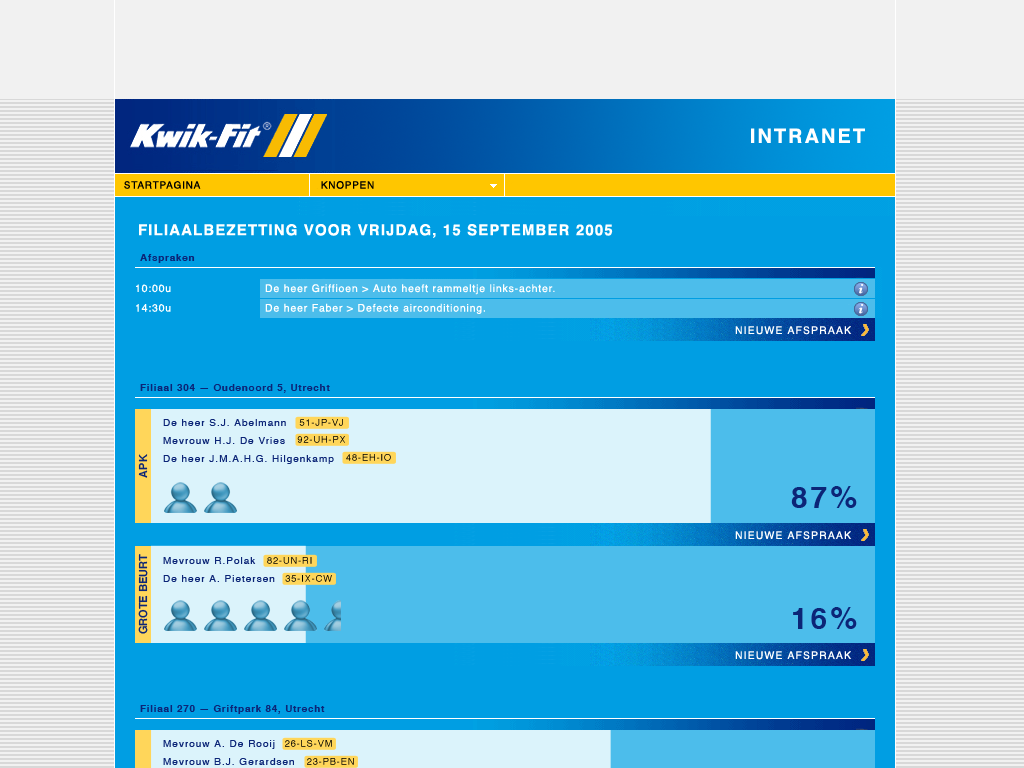
<style>
.page{position:relative;width:1024px;height:768px;background:#009ee3}
.page>*{position:absolute;margin:0}
.t1{font:20px "Helvetica-Bold";letter-spacing:0.1em;color:#ffffff}
.t2{font:10px "Helvetica";letter-spacing:0.075em;color:#000000}
.t3{font:15px "Helvetica-Bold";letter-spacing:0.075em;color:#ffffff}
.t4{font:9.9px "Helvetica-Bold";letter-spacing:0.075em;color:#0c2577}
.t5{font:10.5px/19.6px "Helvetica";letter-spacing:0.075em;color:#ffffff}
.t6{font:10.5px "Helvetica";letter-spacing:0.1em;color:#ffffff}
.t7{font:10px/18px "Helvetica";letter-spacing:0.1em;color:#0c2577}
.t8{font:9.2px "Helvetica";letter-spacing:0.1em}
.t9{font:9.2px "Helvetica";letter-spacing:0.1em;color:#000000}
.t10{font:11px "Helvetica-Bold";color:#0c2577}
.t11{font:30px "Helvetica-Bold";letter-spacing:0.1em;color:#0c2577}
</style>
<div class="page">
<p class="t1" style="left:751px;top:128px;width:114px;height:15px">INTRANET</p>
<p class="t2" style="left:124px;top:181px;width:77px;height:8px">STARTPAGINA</p>
<p class="t2" style="left:321px;top:181px;width:53px;height:8px">KNOPPEN</p>
<p class="t3" style="left:139px;top:224px;width:474px;height:14px">FILIAALBEZETTING VOOR VRIJDAG, 15 SEPTEMBER 2005</p>
<p class="t4" style="left:140px;top:254px;width:55px;height:9px">Afspraken</p>
<p class="t5" style="left:136px;top:284px;width:35px;height:28px">10:00u<br>14:30u</p>
<p class="t5" style="left:265px;top:284px;width:290px;height:30px">De heer Griffioen &gt; Auto heeft rammeltje links-achter.<br>De heer Faber &gt; Defecte airconditioning.</p>
<p class="t6" style="left:735px;top:326px;width:117px;height:9px">NIEUWE AFSPRAAK</p>
<p class="t4" style="left:140px;top:384px;width:190px;height:9px">Filiaal 304 — Oudenoord 5, Utrecht</p>
<p class="t7" style="left:163px;top:419px;width:171px;height:45px">De heer S.J. Abelmann<br>Mevrouw H.J. De Vries<br>De heer J.M.A.H.G. Hilgenkamp</p>
<p class="t8" style="left:299px;top:419px;width:44px;height:7px">51-JP-VJ</p>
<p class="t9" style="left:297px;top:436px;width:48px;height:7px">92-UH-PX</p>
<p class="t10" style="left:138px;top:454px;width:10px;height:24px;rotate:-90deg">APK</p>
<p class="t8" style="left:346px;top:454px;width:45px;height:7px">48-EH-IO</p>
<p class="t11" style="left:791px;top:486px;width:66px;height:22px">87%</p>
<p class="t6" style="left:735px;top:531px;width:117px;height:9px">NIEUWE AFSPRAAK</p>
<p class="t10" style="left:138px;top:554px;width:10px;height:80px;rotate:-90deg">GROTE BEURT</p>
<p class="t7" style="left:163px;top:557px;width:112px;height:25px">Mevrouw R.Polak<br>De heer A. Pietersen</p>
<p class="t8" style="left:267px;top:557px;width:45px;height:7px">82-UN-RI</p>
<p class="t9" style="left:285px;top:575px;width:47px;height:7px">35-IX-CW</p>
<p class="t11" style="left:793px;top:607px;width:64px;height:22px">16%</p>
<p class="t6" style="left:735px;top:651px;width:117px;height:9px">NIEUWE AFSPRAAK</p>
<p class="t4" style="left:140px;top:705px;width:185px;height:9px">Filiaal 270 — Griftpark 84, Utrecht</p>
<p class="t8" style="left:285px;top:740px;width:47px;height:7px">26-LS-VM</p>
<p class="t8" style="left:307px;top:758px;width:47px;height:7px">23-PB-EN</p>
</div>
